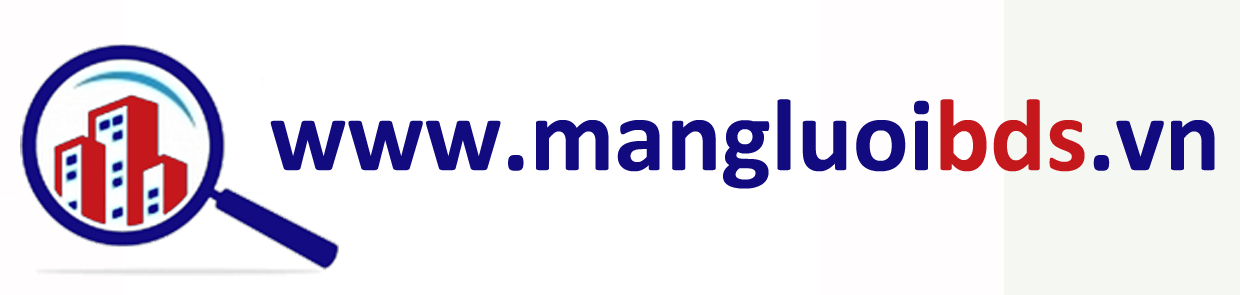
<style>
.page{position:relative;width:1240px;height:295px;background:#ffffff}
.page>*{position:absolute;margin:0}
.t1{font:104.2px "Calibri-Bold";color:#120b7f}
.t2{font:104.2px "Calibri-Bold";color:#c6181d}
</style>
<div class="page">
<p class="t1" style="left:270px;top:99px;width:945px;height:90px">www.mangluoi<span class="t2">bds</span>.vn</p>
</div>
